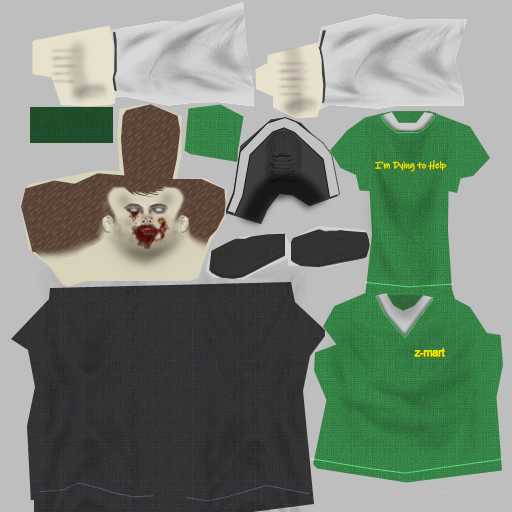
<style>
.page{position:relative;width:512px;height:512px;background:#bebebe}
.page>*{position:absolute;margin:0}
.t1{font:9.3px "InkFree";letter-spacing:-0.025em;color:#e7e400;font-weight:bold}
.t2{font:9.3px "InkFree";letter-spacing:-0.025em;color:#eeeb00;font-weight:bold}
.t3{font:10.5px "ArialMT";letter-spacing:-0.025em;color:#eeeb00;font-weight:bold}
.t4{font:10.5px "ArialMT";letter-spacing:-0.025em;font-weight:bold}
</style>
<div class="page">
<p class="t1" style="left:375px;top:161px;width:72px;height:12px">I’m Dying to Help</p>
<p class="t2" style="left:375px;top:160px;width:72px;height:12px">I’m Dying to Help</p>
<p class="t3" style="left:414px;top:348px;width:31px;height:9px">z-mart</p>
<p class="t4" style="left:415px;top:349px;width:31px;height:9px">z-mart</p>
</div>
